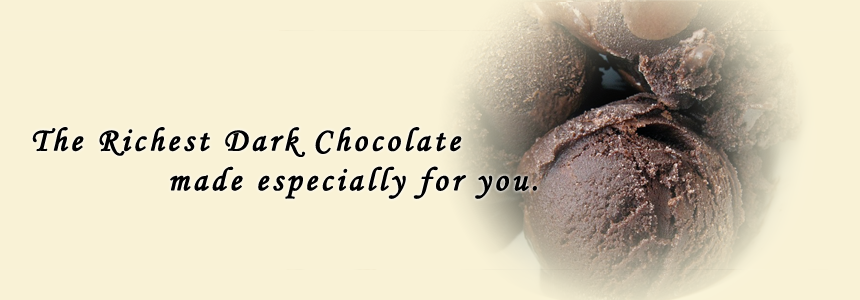
<style>
.page{position:relative;width:860px;height:300px;background:#f9f2d6}
.page>*{position:absolute;margin:0}
.t1{font:33px "MonotypeCorsiva";letter-spacing:0.1em;color:#000000;font-weight:bold}
</style>
<div class="page">
<p class="t1" style="left:32px;top:127px;width:505px;height:72px">The Richest Dark Chocolate<br>            made especially for you.</p>
</div>
